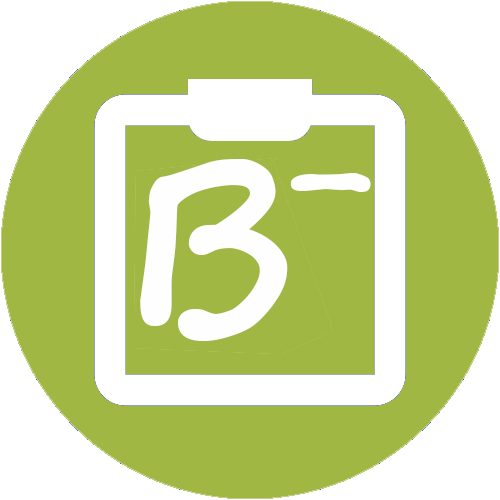
<style>
.page{position:relative;width:500px;height:500px;background:#a0b743}
.page>*{position:absolute;margin:0}
.t1{font:233.3px "SegoeScript-Bold";color:#fefefe}
</style>
<div class="page">
<p class="t1" style="left:140px;top:159px;width:148px;height:182px">B</p>
</div>
